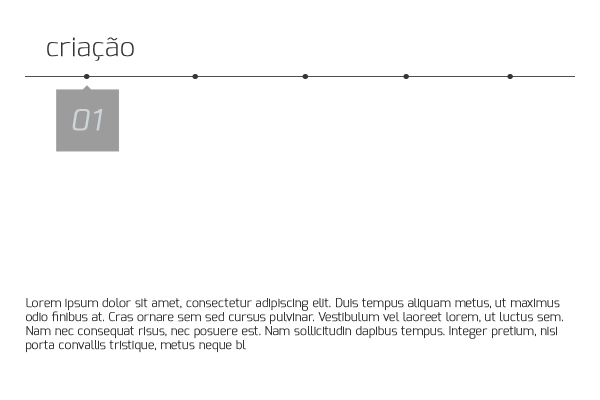
<style>
.page{position:relative;width:600px;height:400px;background:#ffffff}
.page>*{position:absolute;margin:0}
.t1{font:26.3px "Exo-Thin";color:#353535;font-weight:bold}
.t2{font:28.5px "Exo-LightItalic";color:#ced5d9;font-weight:bold}
.t3{font:11.7px "Exo-Thin";color:#353535;font-weight:bold}
</style>
<div class="page">
<p class="t1" style="left:47px;top:37px;width:87px;height:24px">criação</p>
<p class="t2" style="left:72px;top:109px;width:31px;height:22px">01</p>
<p class="t3" style="left:26px;top:298px;width:537px;height:55px">Lorem ipsum dolor sit amet, consectetur adipiscing elit. Duis tempus aliquam metus, ut maximus odio finibus at. Cras ornare sem sed cursus pulvinar. Vestibulum vel laoreet lorem, ut luctus sem. Nam nec consequat risus, nec posuere est. Nam sollicitudin dapibus tempus. Integer pretium, nisi porta convallis tristique, metus neque bl</p>
</div>
